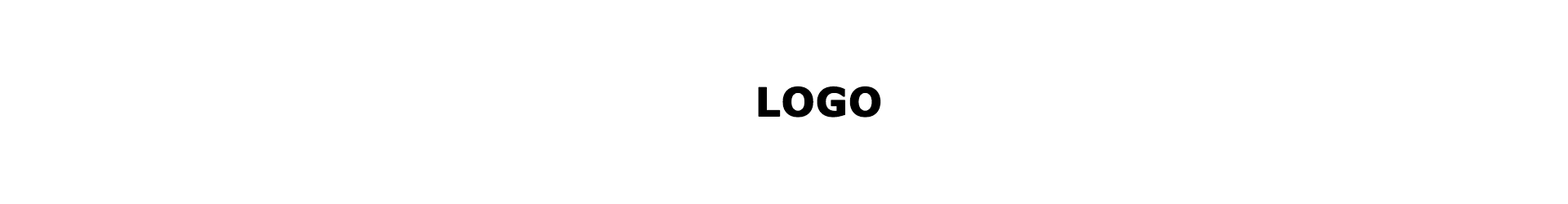
<style>
.page{position:relative;width:1568px;height:204px;background:#ffffff}
.page>*{position:absolute;margin:0}
.t1{font:39.2px "Verdana-Bold";color:#000000;font-weight:bold}
</style>
<div class="page">
<p class="t1" style="left:758px;top:86px;width:123px;height:32px">LOGO</p>
</div>
